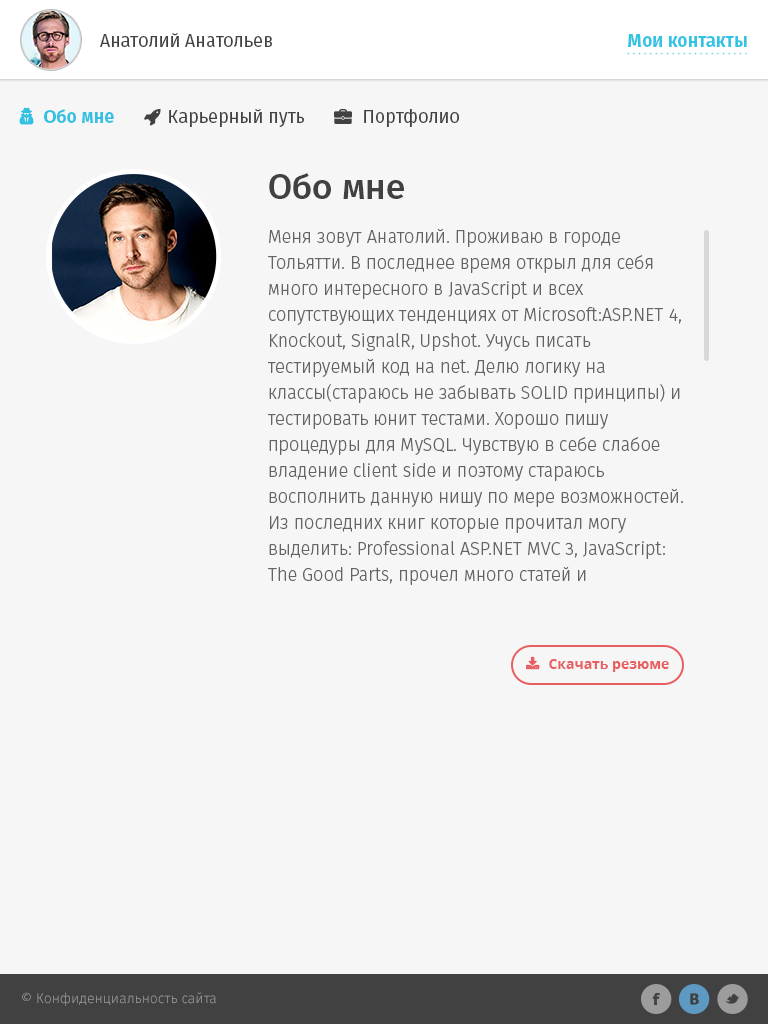
<style>
.page{position:relative;width:768px;height:1024px;background:#f6f6f6}
.page>*{position:absolute;margin:0}
.t1{font:18px "FiraSans-Regular";color:#414141}
.t2{font:18px "FiraSans-Bold";color:#32c3e5}
.t3{font:35px "FiraSans-Medium";color:#414141}
.t4{font:18px/26px "FiraSans-Light";color:#646464}
.t5{font:14px "OpenSans-Bold";color:#e85f61}
.t6{font:14px "FiraSans-Light";color:#9c9c9c}
</style>
<div class="page">
<p class="t1" style="left:100px;top:33px;width:172px;height:14px">Анатолий Анатольев</p>
<p class="t2" style="left:628px;top:34px;width:119px;height:13px">Мои контакты</p>
<p class="t1" style="left:364px;top:109px;width:95px;height:18px">Портфолио</p>
<p class="t3" style="left:269px;top:173px;width:135px;height:26px">Обо мне</p>
<p class="t4" style="left:268px;top:228px;width:415px;height:357px">Меня зовут Анатолий. Проживаю в городе Тольятти. В последнее время открыл для себя много интересного в JavaScript и всех сопутствующих тенденциях от Microsoft:ASP.NET 4, Knockout, SignalR, Upshot. Учусь писать тестируемый код на net. Делю логику на классы(стараюсь не забывать SOLID принципы) и тестировать юнит тестами. Хорошо пишу процедуры для MySQL. Чувствую в себе слабое владение client side и поэтому стараюсь восполнить данную нишу по мере возможностей. Из последних книг которые прочитал могу выделить: Professional ASP.NET MVC 3, JavaScript: The Good Parts, прочел много статей и туториалов. Знаком с “бандой четырех” и стараюсь использовать паттерны и практики где это необходимо и оправданно. Прочитал паттерны несколько раз но все равно есть непонимание некоторых моментов. Макконела также не обошел стороной. Иногда Читаю Фаулера выборочно: рефакторинг, PoEAA. Проблем с 5+ лет в IT было решено много разных.</p>
<p class="t5" style="left:549px;top:659px;width:120px;height:13px">Скачать резюме</p>
<p class="t6" style="left:22px;top:992px;width:194px;height:14px">© Конфиденциальность сайта</p>
</div>
